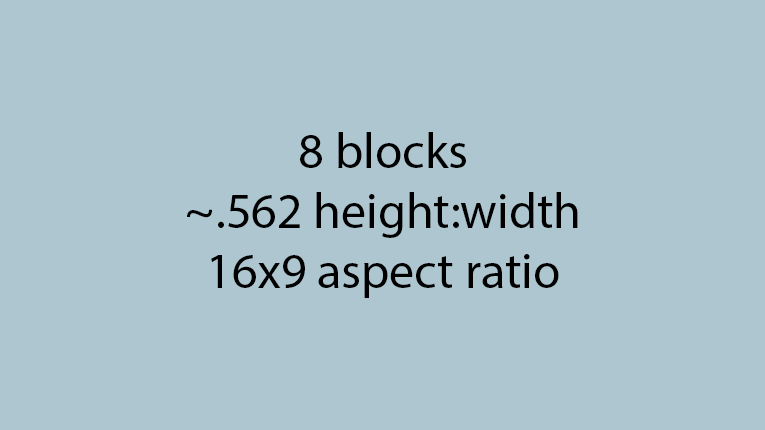
<style>
.page{position:relative;width:765px;height:430px;background:#aec6cf}
.page>*{position:absolute;margin:0}
.t1{font:12px "MyriadPro-Regular";color:#000000}
</style>
<div class="page">
<p class="t1" style="left:187px;top:132px;width:391px;height:166px;text-align:center">8 blocks<br>~.562 height:width<br>16x9 aspect ratio</p>
</div>
